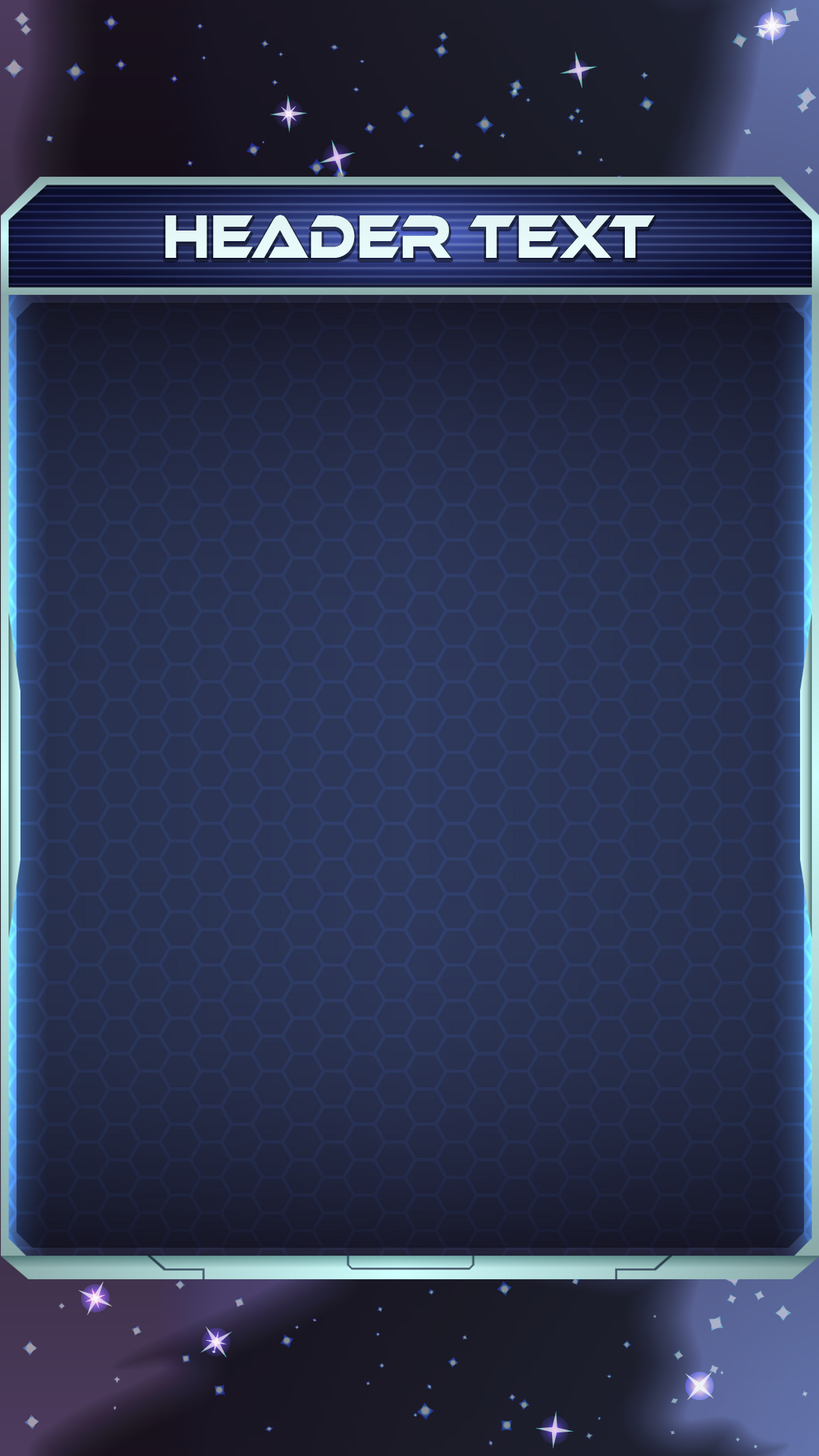
<style>
.page{position:relative;width:819px;height:1456px}
.page>*{position:absolute;margin:0}
.t1{font:63.2px "EthnocentricRg-Regular";color:#ffffff;scale:0.8 1}
</style>
<div class="page">
<p class="t1" style="left:165px;top:215px;width:489px;height:43px">Header text</p>
</div>
